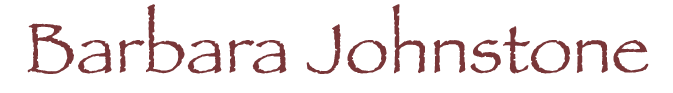
<style>
.page{position:relative;width:673px;height:93px;background:#ffffff}
.page>*{position:absolute;margin:0}
.t1{font:72px "Papyrus";color:#793638}
</style>
<div class="page">
<p class="t1" style="left:27px;top:4px;width:622px;height:70px">Barbara Johnstone</p>
</div>
